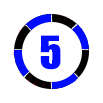
<style>
.page{position:relative;width:103px;height:103px;background:#ffffff}
.page>*{position:absolute;margin:0}
.t1{font:41.7px "Impact";color:#000cff}
</style>
<div class="page">
<p class="t1" style="left:40px;top:35px;width:21px;height:35px">5</p>
</div>
